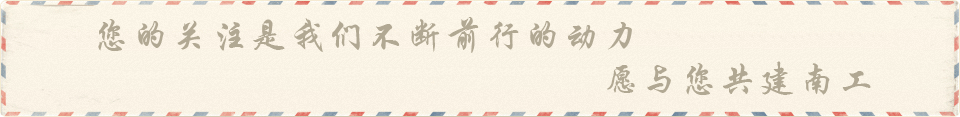
<style>
.page{position:relative;width:960px;height:117px}
.page>*{position:absolute;margin:0}
.t1{font:36px "STXingkai";letter-spacing:0.09em;color:#b1a893}
</style>
<div class="page">
<p class="t1" style="left:98px;top:17px;width:534px;height:36px">您的关注是我们不断前行的动力</p>
<p class="t1" style="left:607px;top:61px;width:264px;height:34px">愿与您共建南工</p>
</div>
